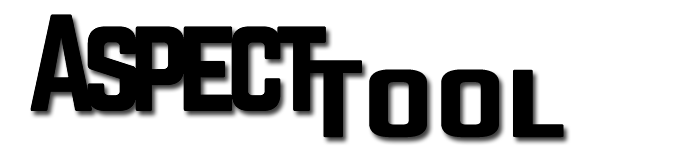
<style>
.page{position:relative;width:700px;height:150px;background:#ffffff}
.page>*{position:absolute;margin:0}
.t1{font:120px "Norwester-Regular";letter-spacing:-0.1em;color:#000000}
.t2{font:120px "Norwester-Regular";letter-spacing:-0.12em;color:#000000}
.t3{font:120px "Norwester-Regular";color:#000000}
.t4{font:96px "Norwester-Regular";color:#000000;scale:1.5 1}
</style>
<div class="page">
<p class="t1" style="left:30px;top:14px;width:296px;height:98px"><span class="t2">A</span>spec<span class="t3">t</span></p>
<p class="t4" style="left:304px;top:60px;width:260px;height:78px"><span class="t3"> </span>Tool</p>
</div>
